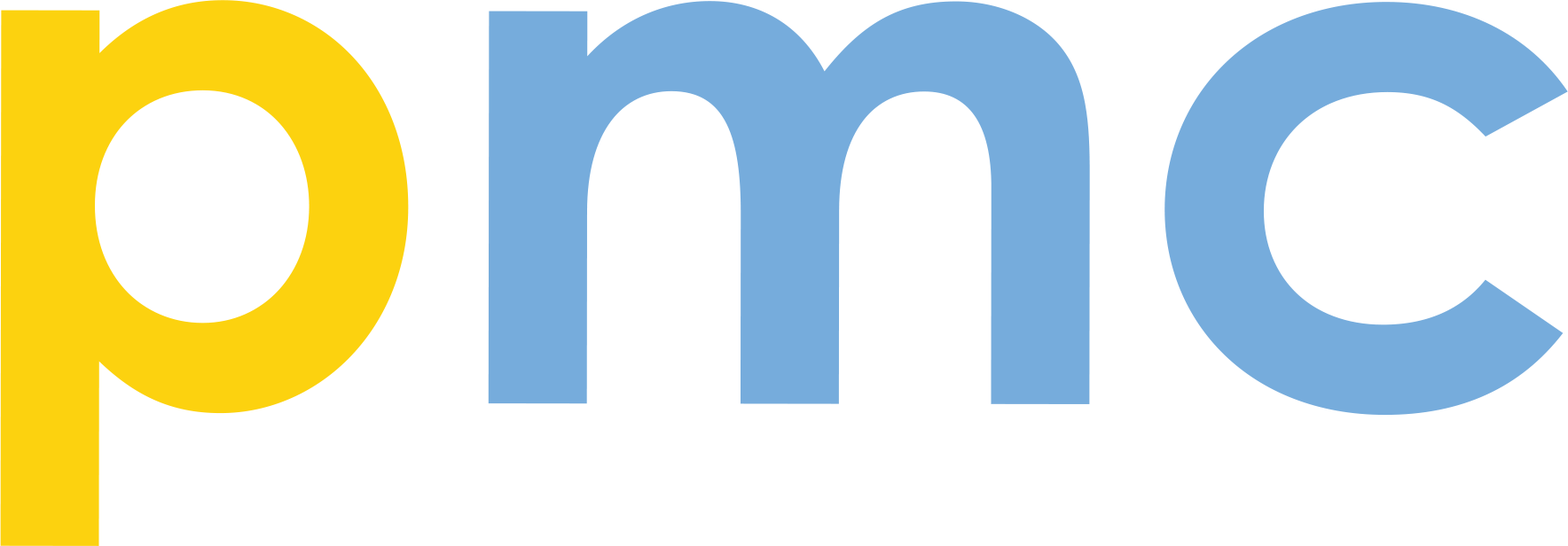
<style>
.page{position:relative;width:1568px;height:546px;background:#ffffff}
.page>*{position:absolute;margin:0}
.t1{font:739.1px "CenturyGothicPro-Bold";color:#76acdc}
.t2{font:739.1px "CenturyGothicPro-Bold";color:#fcd20f}
</style>
<div class="page">
<p class="t1" style="left:0px;top:0px;width:1568px;height:546px"><span class="t2">p</span>mc</p>
</div>
